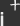
<style>
.page{position:relative;width:20px;height:26px;background:#333333}
.page>*{position:absolute;margin:0}
.t1{font:12px "DFKaiShu-SB-Estd-BF";color:#ececec;font-weight:bold}
</style>
<div class="page">
<p class="t1" style="left:10px;top:0px;width:10px;height:11px">十</p>
</div>
